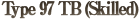
<style>
.page{position:relative;width:139px;height:19px;background:#ffffff}
.page>*{position:absolute;margin:0}
.t1{font:18px "RyuminPro-ExBold";letter-spacing:-0.095em;color:#4a3f32;font-weight:bold;scale:0.9 1}
</style>
<div class="page">
<p class="t1" style="left:1px;top:1px;width:138px;height:18px">Type 97 TB (Skilled)</p>
</div>
